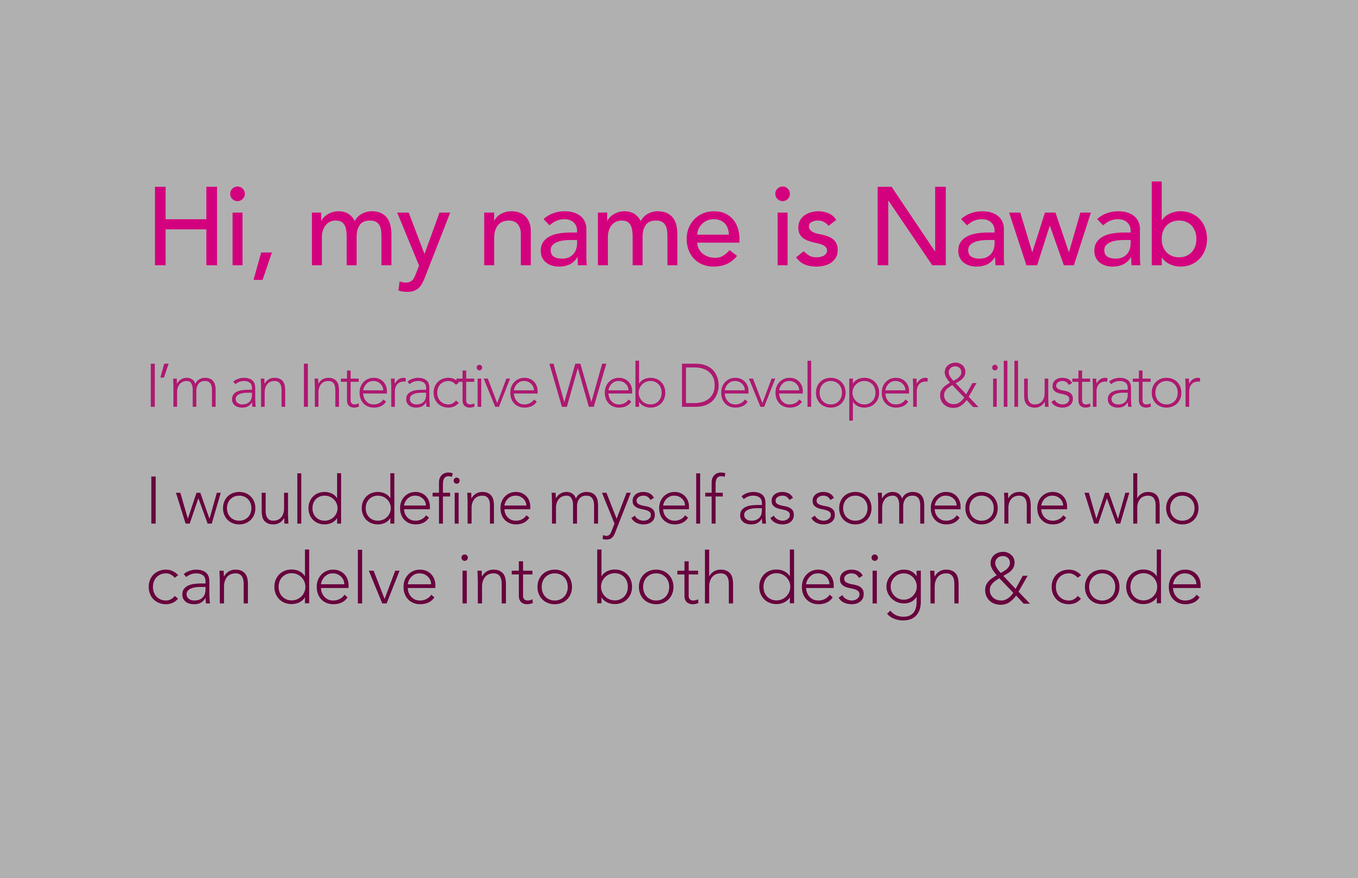
<style>
.page{position:relative;width:1358px;height:878px;background:#b0b0b0}
.page>*{position:absolute;margin:0}
.t1{font:110.9px "Avenir-Medium";letter-spacing:-0.025em;color:#d4017e}
.t2{font:61px "Avenir-Light";letter-spacing:-0.065em;color:#ad1971}
.t3{font:66.5px/79.9px "Avenir-Light";letter-spacing:-0.035em;color:#68023e}
.t4{font:71px/79.9px "Avenir-Light";letter-spacing:-0.012em;color:#68023e}
</style>
<div class="page">
<p class="t1" style="left:155px;top:182px;width:1052px;height:110px">Hi, my name is Nawab</p>
<p class="t2" style="left:151px;top:361px;width:1049px;height:60px">I’m an Interactive Web Developer &amp; illustrator</p>
<p class="t3" style="left:149px;top:473px;width:1051px;height:148px">I would define myself as someone who <span class="t4">can delve into both design &amp; code</span></p>
</div>
